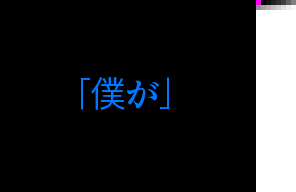
<style>
.page{position:relative;width:296px;height:192px;background:#000000}
.page>*{position:absolute;margin:0}
.t1{font:36px "RodinPro-M";letter-spacing:-0.04em;color:#0078ff}
.t2{font:36px "MatisseVPro-DB";color:#0078ff}
</style>
<div class="page">
<p class="t1" style="left:81px;top:77px;width:88px;height:33px">「僕   」</p>
<p class="t2" style="left:127px;top:80px;width:32px;height:29px">が</p>
</div>
